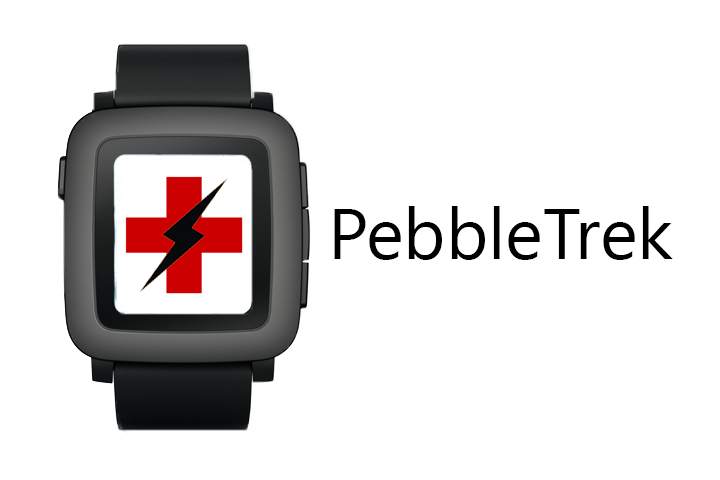
<style>
.page{position:relative;width:720px;height:480px;background:#ffffff}
.page>*{position:absolute;margin:0}
.t1{font:72px "SegoeUI";color:#000000}
</style>
<div class="page">
<p class="t1" style="left:334px;top:206px;width:339px;height:54px">PebbleTrek</p>
</div>
